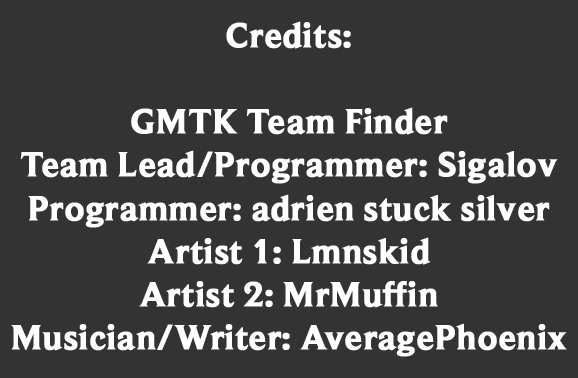
<style>
.page{position:relative;width:578px;height:378px;background:#333333}
.page>*{position:absolute;margin:0}
.t1{font:36px "BeaufortforLOL-Bold";color:#ffffff;font-weight:bold}
</style>
<div class="page">
<p class="t1" style="left:11px;top:21px;width:556px;height:336px;text-align:center">Credits:<br><br>GMTK Team Finder<br>Team Lead/Programmer: Sigalov<br>Programmer: adrien stuck silver<br>Artist 1: Lmnskid<br>Artist 2: MrMuffin<br>Musician/Writer: AveragePhoenix</p>
</div>
